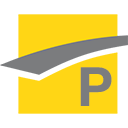
<style>
.page{position:relative;width:128px;height:128px;background:#ffffff}
.page>*{position:absolute;margin:0}
.t1{font:54.2px "HelveticaNeue-Bold";color:#7b7c7e}
</style>
<div class="page">
<p class="t1" style="left:80px;top:67px;width:32px;height:39px">P</p>
</div>
